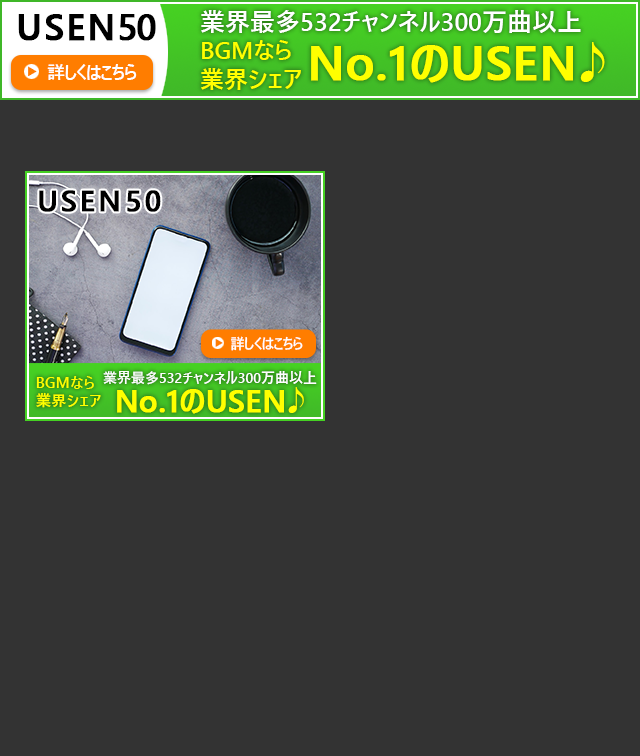
<style>
.page{position:relative;width:640px;height:756px;background:#333333}
.page>*{position:absolute;margin:0}
.t1{font:36px "YuGothicUI-Bold";letter-spacing:0.04em;color:#000000;font-weight:bold}
.t2{font:36px "YuGothicUI-Bold";letter-spacing:-0.06em;color:#000000;font-weight:bold}
.t3{font:25px "YuGothicUI-Bold";color:#ffffff}
.t4{font:24px "YuGothicUI-Bold";color:#ffff00}
.t5{font:48px "YuGothicUI-Bold";color:#ffff00;font-weight:bold}
.t6{font:48px "YuGothicUI-Bold";letter-spacing:-0.16em;color:#ffff00;font-weight:bold}
.t7{font:48px "YuGothicUI-Bold";letter-spacing:-0.2em;color:#ffff00}
.t8{font:18px "YuGothicUI-Bold";letter-spacing:-0.06em;color:#ffffff}
.t9{font:10.4px "YuGothicUI-Bold";letter-spacing:-0.06em;color:#ff7d00;font-weight:bold}
.t10{font:29.4px "YuGothicUI-Bold";letter-spacing:0.08em;color:#000000;font-weight:bold}
.t11{font:29.4px "YuGothicUI-Bold";letter-spacing:0.14em;color:#000000;font-weight:bold}
.t12{font:29.4px "YuGothicUI-Bold";color:#000000;font-weight:bold}
.t13{font:8.5px "YuGothicUI-Bold";letter-spacing:-0.06em;color:#ff7d00;font-weight:bold}
.t14{font:14.7px "YuGothicUI-Bold";letter-spacing:-0.06em;color:#ffffff}
.t15{font:15.5px "YuGothicUI-Bold";color:#ffff00}
.t16{font:14px "YuGothicUI-Bold";color:#ffffff}
.t17{font:30.5px "YuGothicUI-Bold";color:#ffff00;font-weight:bold}
.t18{font:30.5px "YuGothicUI-Bold";letter-spacing:-0.16em;color:#ffff00;font-weight:bold}
.t19{font:30.5px "YuGothicUI-Bold";letter-spacing:-0.2em;color:#ffff00}
</style>
<div class="page">
<p class="t1" style="left:18px;top:14px;width:138px;height:27px">USEN<span class="t2">50</span></p>
<p class="t3" style="left:201px;top:10px;width:380px;height:23px">業界最多532チャンネル300万曲以上</p>
<p class="t4" style="left:201px;top:40px;width:100px;height:50px">BGMなら<br>業界シェア</p>
<p class="t5" style="left:311px;top:42px;width:294px;height:41px">No.1のUSE<span class="t6">N</span><span class="t7">♪</span></p>
<p class="t8" style="left:47px;top:64px;width:90px;height:16px">詳しくはこちら</p>
<p class="t9" style="left:28px;top:66px;width:9px;height:10px">▶</p>
<p class="t10" style="left:39px;top:190px;width:122px;height:22px">USE<span class="t11">N</span>5<span class="t12">0</span></p>
<p class="t13" style="left:215px;top:339px;width:8px;height:8px">▶</p>
<p class="t14" style="left:231px;top:336px;width:72px;height:15px">詳しくはこちら</p>
<p class="t15" style="left:36px;top:376px;width:65px;height:32px">BGMなら<br>業界シェア</p>
<p class="t16" style="left:103px;top:371px;width:214px;height:14px">業界最多532チャンネル300万曲以上</p>
<p class="t17" style="left:117px;top:387px;width:187px;height:27px">No.1のUSE<span class="t18">N</span><span class="t19">♪</span></p>
</div>
